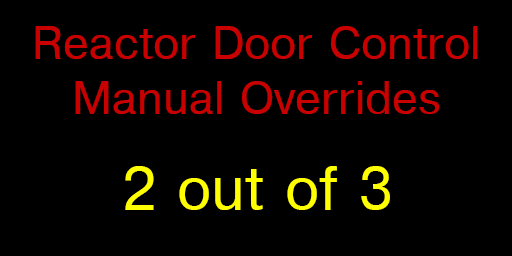
<style>
.page{position:relative;width:512px;height:256px;background:#000000}
.page>*{position:absolute;margin:0}
.t1{font:46px "Helvetica";color:#c80000}
.t2{font:60px "Helvetica";color:#ffff00}
</style>
<div class="page">
<p class="t1" style="left:35px;top:26px;width:443px;height:88px;text-align:center">Reactor Door Control<br>Manual Overrides</p>
<p class="t2" style="left:125px;top:166px;width:265px;height:44px">2 out of 3</p>
</div>
